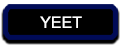
<style>
.page{position:relative;width:122px;height:45px;background:#000000}
.page>*{position:absolute;margin:0}
.t1{font:16px "ArialMT";color:#ffffff}
</style>
<div class="page">
<p class="t1" style="left:40px;top:16px;width:42px;height:12px">YEET</p>
</div>
